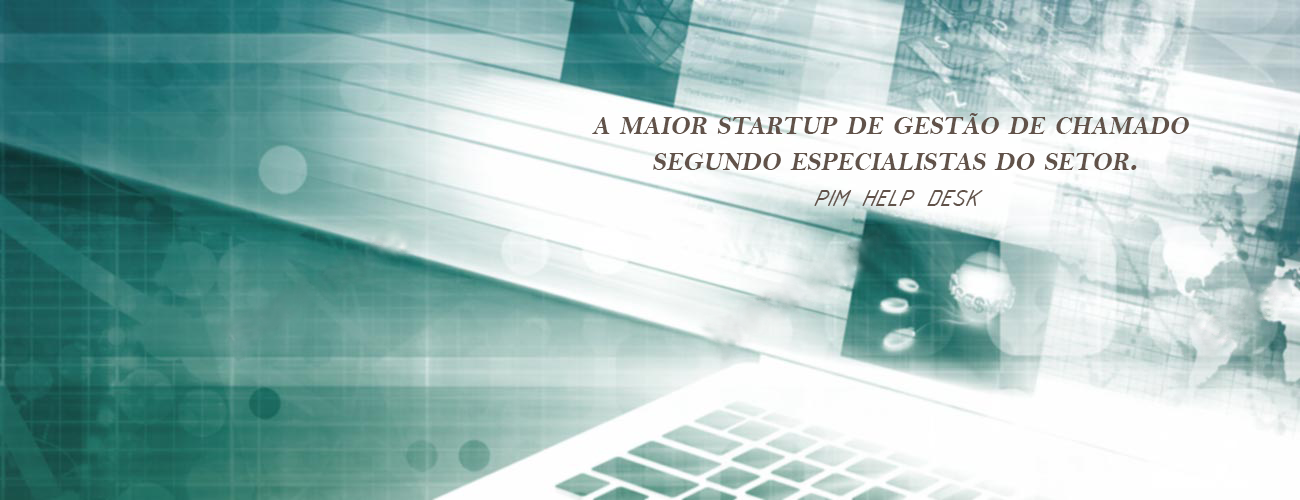
<style>
.page{position:relative;width:1300px;height:500px}
.page>*{position:absolute;margin:0}
.t1{font:36px/36px "BellMTBold";color:#615249;font-variant:small-caps;font-style:italic}
.t2{font:36px/36px "ISOCPEURItalic";color:#615249;font-variant:small-caps;font-style:italic}
</style>
<div class="page">
<p class="t1" style="left:592px;top:113px;width:597px;height:93px;text-align:center">a maior startup de gestão de chamado <br>segundo especialistas do setor.<br><span class="t2">pim help desk</span></p>
</div>
